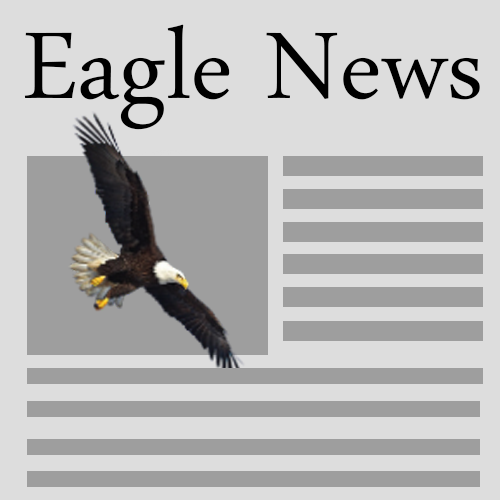
<style>
.page{position:relative;width:500px;height:500px;background:#dddddd}
.page>*{position:absolute;margin:0}
.t1{font:138.9px "DaunPenh";color:#000000}
</style>
<div class="page">
<p class="t1" style="left:24px;top:24px;width:456px;height:106px">Eagle News</p>
</div>
